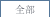
<style>
.page{position:relative;width:50px;height:18px;background:#ffffff}
.page>*{position:absolute;margin:0}
.t1{font:10px "SimSun"}
</style>
<div class="page">
<p class="t1" style="left:15px;top:4px;width:20px;height:10px">全部</p>
</div>
